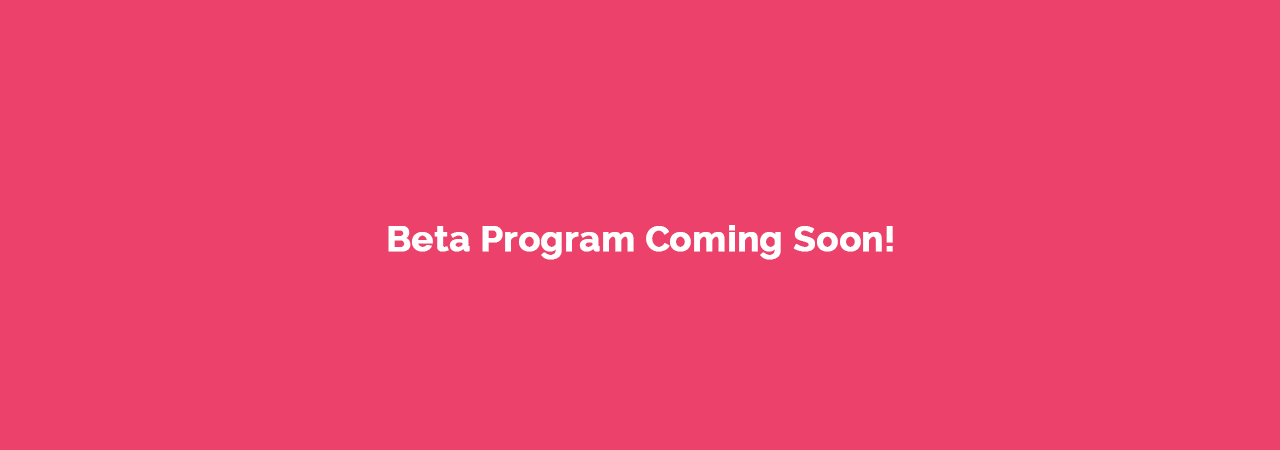
<style>
.page{position:relative;width:1280px;height:450px;background:#eb416b}
.page>*{position:absolute;margin:0}
.t1{font:36px "Raleway-Bold";color:#ffffff;font-weight:bold}
</style>
<div class="page">
<p class="t1" style="left:388px;top:225px;width:505px;height:35px">Beta Program Coming Soon!</p>
</div>
